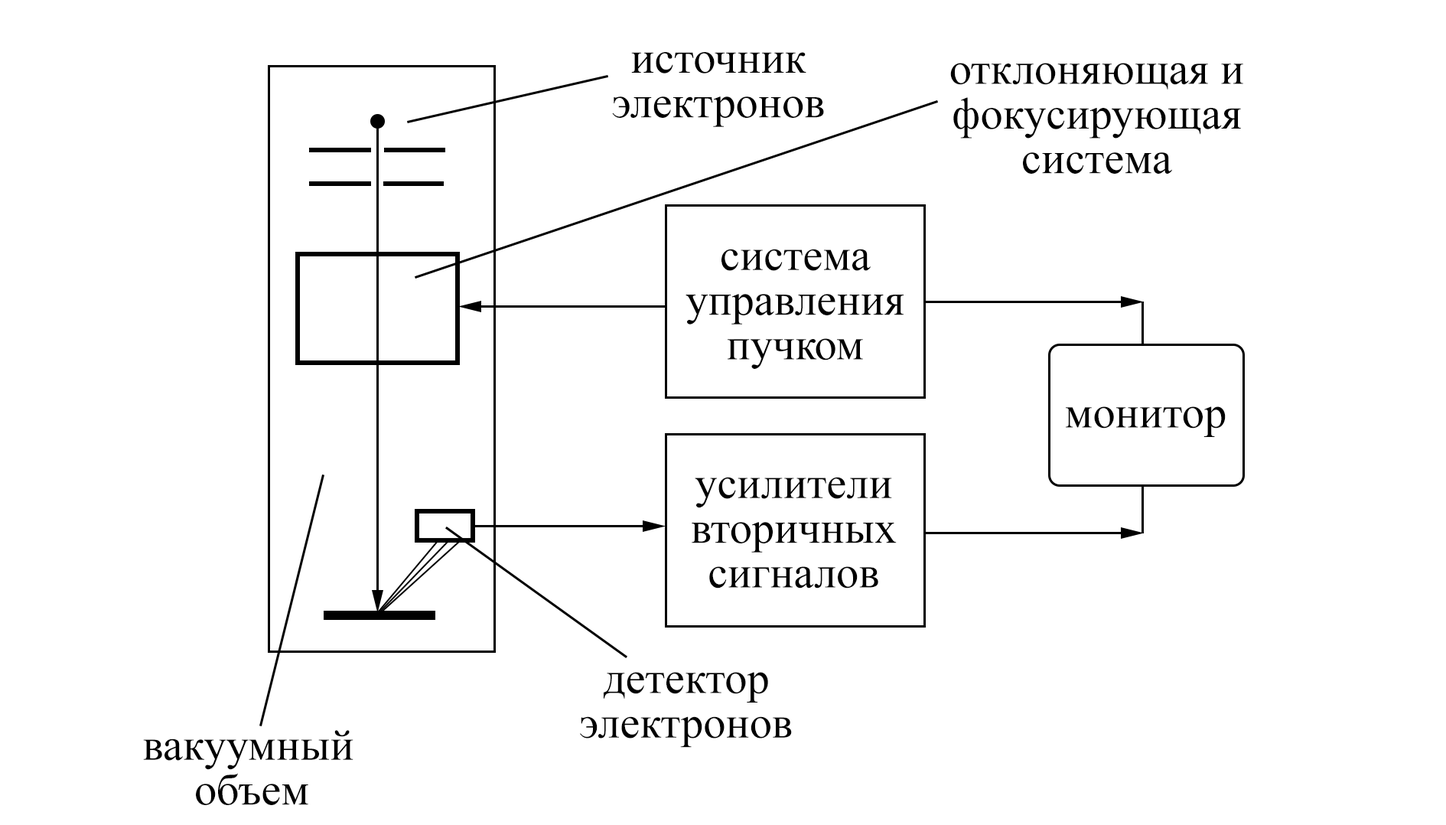
<style>
.page{position:relative;width:1446px;height:825px;background:#ffffff}
.page>*{position:absolute;margin:0}
.t1{font:44.6px/44.6px "TimesNewRomanPSMT";color:#000000}
.t2{font:44.6px "TimesNewRomanPSMT";color:#000000}
</style>
<div class="page">
<p class="t1" style="left:612px;top:52px;width:212px;height:75px;text-align:center">источник<br>электронов</p>
<p class="t1" style="left:950px;top:63px;width:293px;height:111px;text-align:center">отклоняющая и<br>фокусирующая<br>система</p>
<p class="t1" style="left:685px;top:249px;width:218px;height:120px;text-align:center">система<br>управления<br>пучком</p>
<p class="t2" style="left:1066px;top:406px;width:160px;height:31px">монитор</p>
<p class="t1" style="left:692px;top:477px;width:205px;height:111px;text-align:center">усилители<br>вторичных<br>сигналов</p>
<p class="t1" style="left:580px;top:672px;width:212px;height:75px;text-align:center">детектор<br>электронов</p>
<p class="t1" style="left:143px;top:730px;width:210px;height:75px;text-align:center">вакуумный<br>объем</p>
</div>
